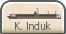
<style>
.page{position:relative;width:66px;height:34px}
.page>*{position:absolute;margin:0}
.t1{font:10px "UDShinGoPro-Light";color:#6a6560;scale:0.9 1}
</style>
<div class="page">
<p class="t1" style="left:15px;top:21px;width:36px;height:9px">K. Induk</p>
</div>
